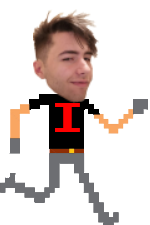
<style>
.page{position:relative;width:150px;height:225px;background:#ffffff}
.page>*{position:absolute;margin:0}
.t1{font:58.3px "ArcadeClassic";color:#ff0000}
</style>
<div class="page">
<p class="t1" style="left:55px;top:103px;width:25px;height:29px">I</p>
</div>
